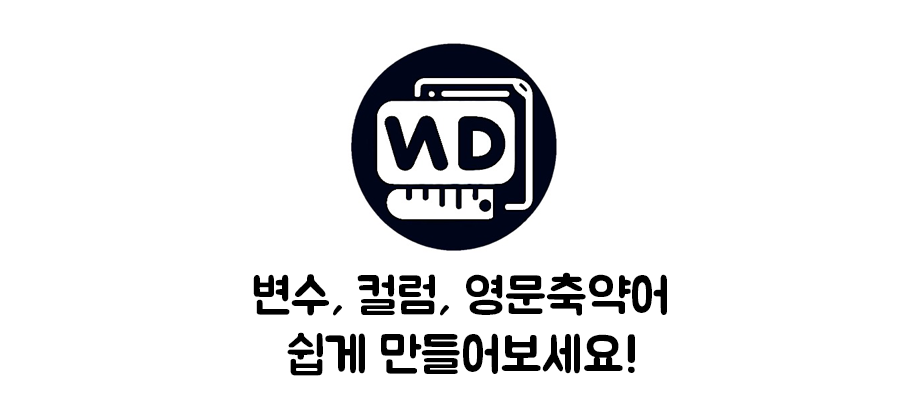
<style>
.page{position:relative;width:903px;height:420px;background:#ffffff}
.page>*{position:absolute;margin:0}
.t1{font:50px "BMJUAOTF";color:#000000}
</style>
<div class="page">
<p class="t1" style="left:253px;top:272px;width:414px;height:44px">변수, 컬럼, 영문축약어</p>
<p class="t1" style="left:287px;top:332px;width:348px;height:44px">쉽게 만들어보세요!</p>
</div>
